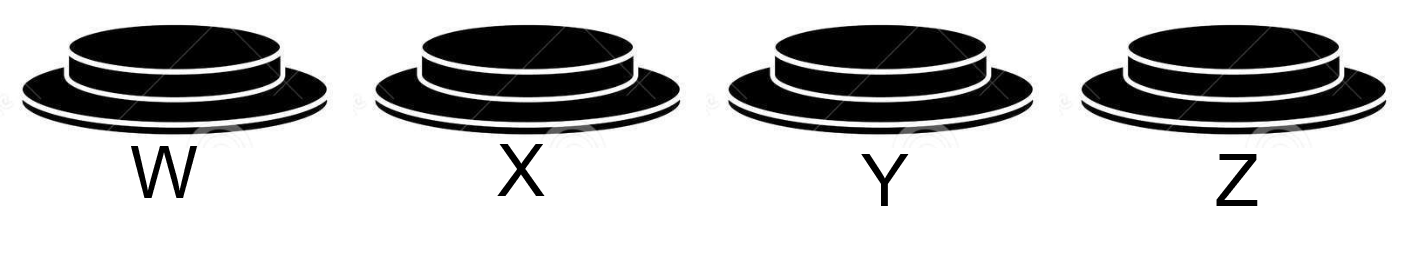
<style>
.page{position:relative;width:1412px;height:254px;background:#ffffff}
.page>*{position:absolute;margin:0}
.t1{font:72px "ArialMT";color:#000000}
</style>
<div class="page">
<p class="t1" style="left:131px;top:146px;width:67px;height:52px">W</p>
<p class="t1" style="left:497px;top:144px;width:48px;height:52px">X</p>
<p class="t1" style="left:861px;top:154px;width:48px;height:52px">Y</p>
<p class="t1" style="left:1216px;top:154px;width:42px;height:52px">Z</p>
</div>
